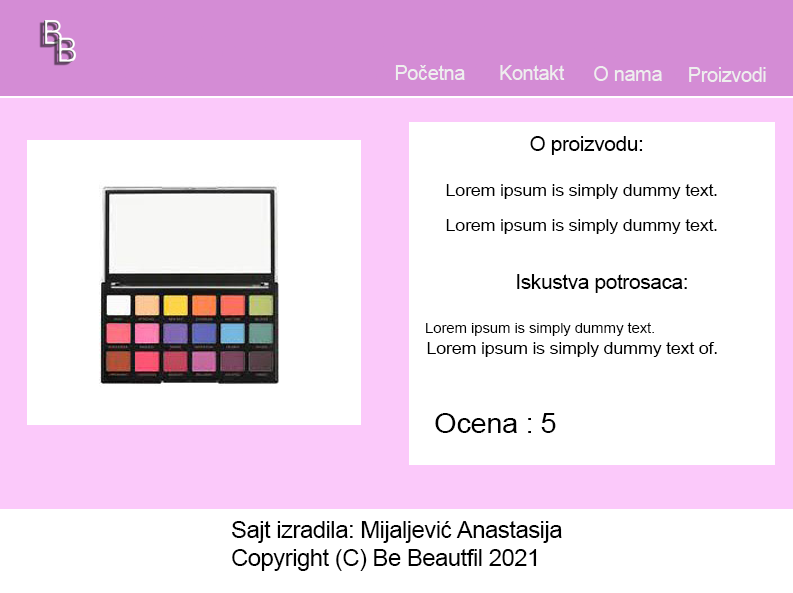
<style>
.page{position:relative;width:793px;height:593px;background:#ffffff}
.page>*{position:absolute;margin:0}
.t1{font:20px "ArialMT";letter-spacing:-0.02em;color:#eeeeee}
.t2{font:20.3px "ArialMT";letter-spacing:-0.02em;color:#eeeeee}
.t3{font:20px "ArialMT";letter-spacing:-0.02em;color:#000000;scale:1.05 1}
.t4{font:17.3px/34.7px "ArialMT";letter-spacing:-0.02em;color:#000000;scale:1.05 1}
.t5{font:14.4px "ArialMT";letter-spacing:-0.02em;color:#000000;scale:1.07 1}
.t6{font:17.3px "ArialMT";letter-spacing:-0.02em;color:#000000;scale:1.05 1}
.t7{font:28px "ArialMT";letter-spacing:-0.02em;color:#000000;scale:1.05 1}
.t8{font:22.7px/28.1px "ArialMT";letter-spacing:-0.02em;color:#000000;scale:1.05 1}
</style>
<div class="page">
<p class="t1" style="left:395px;top:65px;width:70px;height:15px">Početna</p>
<p class="t2" style="left:500px;top:65px;width:65px;height:15px">Kontakt</p>
<p class="t1" style="left:594px;top:66px;width:68px;height:15px">O nama</p>
<p class="t1" style="left:689px;top:67px;width:77px;height:15px">Proizvodi</p>
<p class="t3" style="left:530px;top:136px;width:113px;height:19px">O proizvodu:</p>
<p class="t4" style="left:446px;top:184px;width:271px;height:50px">Lorem ipsum is simply dummy text.<br>Lorem ipsum is simply dummy text.</p>
<p class="t3" style="left:517px;top:274px;width:170px;height:19px">Iskustva potrosaca:</p>
<p class="t5" style="left:426px;top:322px;width:228px;height:14px">Lorem ipsum is simply dummy text.</p>
<p class="t6" style="left:427px;top:342px;width:290px;height:15px">Lorem ipsum is simply dummy text of.</p>
<p class="t7" style="left:435px;top:413px;width:121px;height:20px">Ocena : 5</p>
<p class="t8" style="left:232px;top:521px;width:330px;height:50px">Sajt izradila: Mijaljević Anastasija<br>Copyright (C) Be Beautfil 2021</p>
</div>
